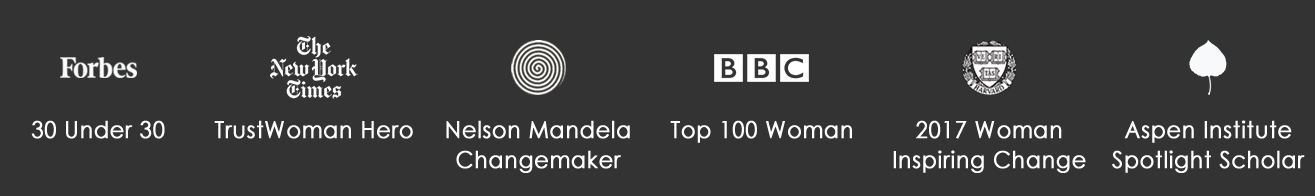
<style>
.page{position:relative;width:1315px;height:196px;background:#333333}
.page>*{position:absolute;margin:0}
.t1{font:23.5px "CenturyGothic";letter-spacing:0.02em;color:#ffffff;font-weight:bold;scale:0.93 1}
</style>
<div class="page">
<p class="t1" style="left:31px;top:120px;width:134px;height:19px">30 Under 30</p>
<p class="t1" style="left:214px;top:120px;width:199px;height:19px">TrustWoman Hero</p>
<p class="t1" style="left:446px;top:120px;width:184px;height:53px;text-align:center">Nelson Mandela<br>Changemaker</p>
<p class="t1" style="left:670px;top:120px;width:182px;height:23px">Top 100 Woman</p>
<p class="t1" style="left:893px;top:120px;width:193px;height:53px;text-align:center">2017 Woman<br>Inspiring Change</p>
<p class="t1" style="left:1112px;top:120px;width:193px;height:53px;text-align:center">Aspen Institute<br>Spotlight Scholar</p>
</div>
